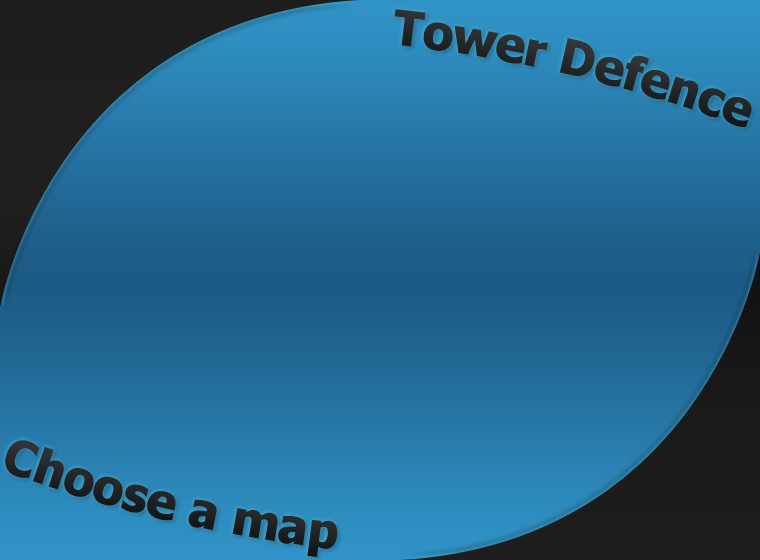
<style>
.page{position:relative;width:760px;height:560px}
.page>*{position:absolute;margin:0}
.t1{font:48px "Tahoma-Bold";color:#26282a}
.t2{font:48px "Tahoma-Bold";color:#1f2123}
</style>
<div class="page">
<p class="t1" style="left:394px;top:9px;width:358px;height:118px;rotate:13deg">Tower Defence</p>
<p class="t2" style="left:5px;top:440px;width:333px;height:117px;rotate:13deg">Choose a map</p>
</div>
